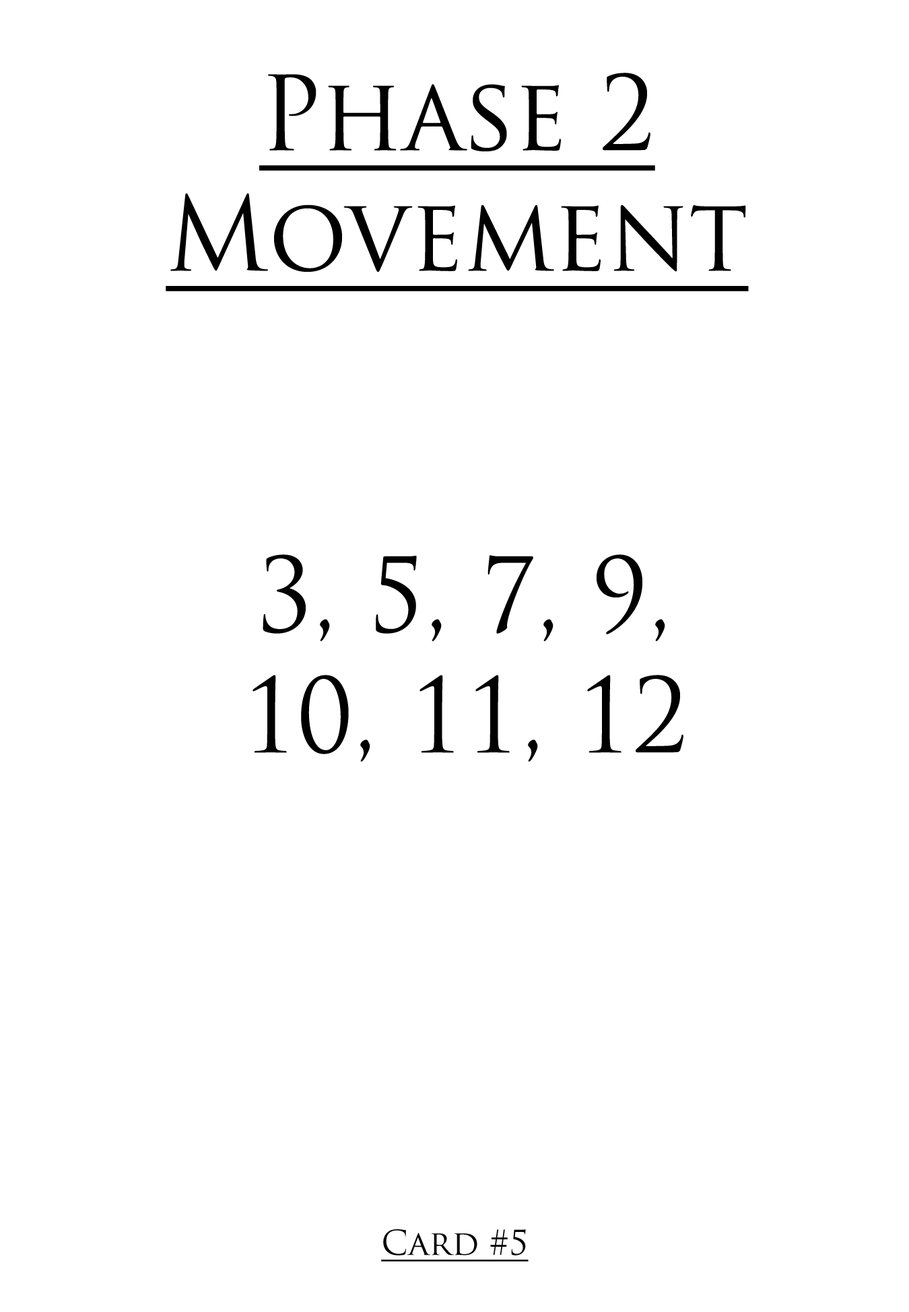
<style>
.page{position:relative;width:909px;height:1312px;background:#ffffff}
.page>*{position:absolute;margin:0}
.t1{font:100.6px "TrajanPro-Regular";color:#000000;text-decoration:underline;scale:0.97 1}
.t2{font:100.6px "TrajanPro-Regular";color:#000000;scale:0.97 1}
.t3{font:33.5px "TrajanPro-Regular";color:#000000;text-decoration:underline}
</style>
<div class="page">
<p class="t1" style="left:166px;top:73px;width:582px;height:218px;text-align:center">Phase 2<br>Movement</p>
<p class="t2" style="left:252px;top:555px;width:431px;height:207px;text-align:center">3, 5, 7, 9,<br>10, 11, 12</p>
<p class="t3" style="left:381px;top:1230px;width:147px;height:32px">Card #5</p>
</div>
